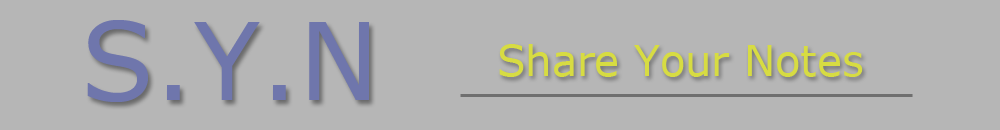
<style>
.page{position:relative;width:1000px;height:130px;background:#b6b6b6}
.page>*{position:absolute;margin:0}
.t1{font:107.4px "Verdana";color:#6f76ac}
.t2{font:41.7px "Verdana";color:#d7dc42}
</style>
<div class="page">
<p class="t1" style="left:87px;top:20px;width:282px;height:82px">S.Y.N</p>
<p class="t2" style="left:499px;top:44px;width:364px;height:33px">Share Your Notes</p>
</div>
